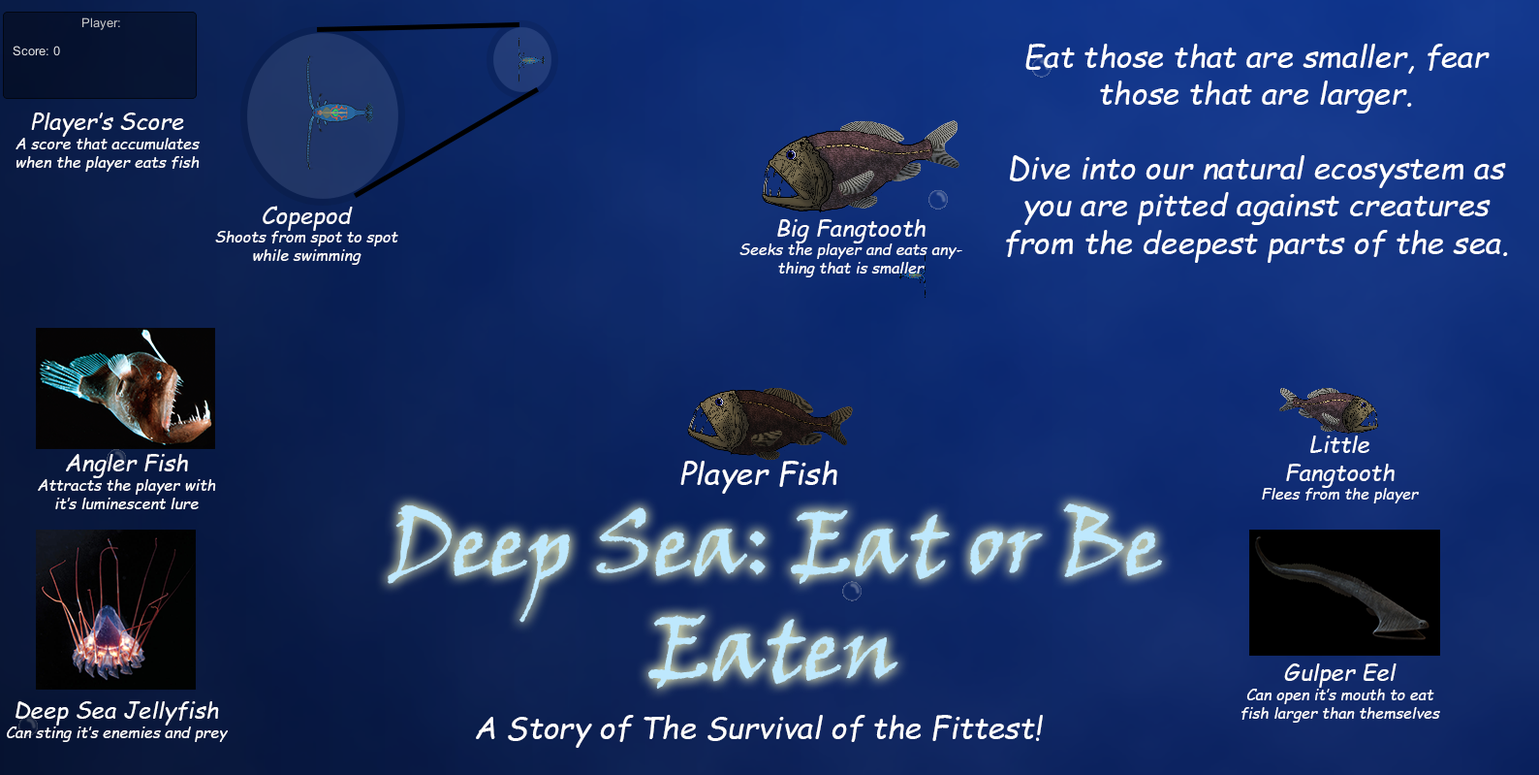
<style>
.page{position:relative;width:1539px;height:775px}
.page>*{position:absolute;margin:0}
.t1{font:31px "ComicSansMS-Italic";color:#ffffff}
.t2{font:15.5px "ComicSansMS-Italic";color:#ffffff}
.t3{font:23.3px "ComicSansMS-Italic";color:#ffffff}
</style>
<div class="page">
<p class="t1" style="left:1006px;top:44px;width:502px;height:219px;text-align:center">Eat those that are smaller, fear those that are larger. <br><br>Dive into our natural ecosystem as you are pitted against creatures from the deepest parts of the sea.</p>
<p class="t2" style="left:16px;top:112px;width:184px;height:60px;text-align:center"><span class="t3">Player’s Score<br></span>A score that accumulates when the player eats fish</p>
<p class="t2" style="left:215px;top:206px;width:183px;height:59px;text-align:center"><span class="t3">Copepod<br></span>Shoots from spot to spot while swimming</p>
<p class="t2" style="left:740px;top:219px;width:223px;height:58px;text-align:center"><span class="t3">Big Fangtooth<br></span>Seeks the player and eats anything that is smaller</p>
<p class="t2" style="left:1262px;top:435px;width:157px;height:68px;text-align:center"><span class="t3">Little<br>Fangtooth<br></span>Flees from the player</p>
<p class="t2" style="left:38px;top:454px;width:178px;height:55px;text-align:center"><span class="t3">Angler Fish<br></span>Attracts the player with it’s luminescent lure</p>
<p class="t1" style="left:681px;top:460px;width:157px;height:33px">Player Fish</p>
<p class="t2" style="left:1242px;top:663px;width:199px;height:59px;text-align:center"><span class="t3">Gulper Eel<br></span>Can open it’s mouth to eat fish larger than themselves</p>
<p class="t2" style="left:7px;top:701px;width:221px;height:41px;text-align:center"><span class="t3">Deep Sea Jellyfish<br></span>Can sting it’s enemies and prey</p>
<p class="t1" style="left:476px;top:714px;width:567px;height:33px">A Story of The Survival of the Fittest!</p>
</div>
